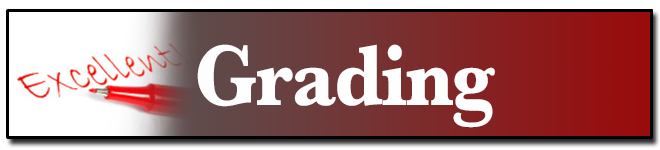
<style>
.page{position:relative;width:660px;height:150px}
.page>*{position:absolute;margin:0}
.t1{font:89.6px "Baskerville-Bold";letter-spacing:-0.03em;color:#fffefe;scale:0.89 1}
</style>
<div class="page">
<p class="t1" style="left:197px;top:44px;width:298px;height:84px">Grading</p>
</div>
